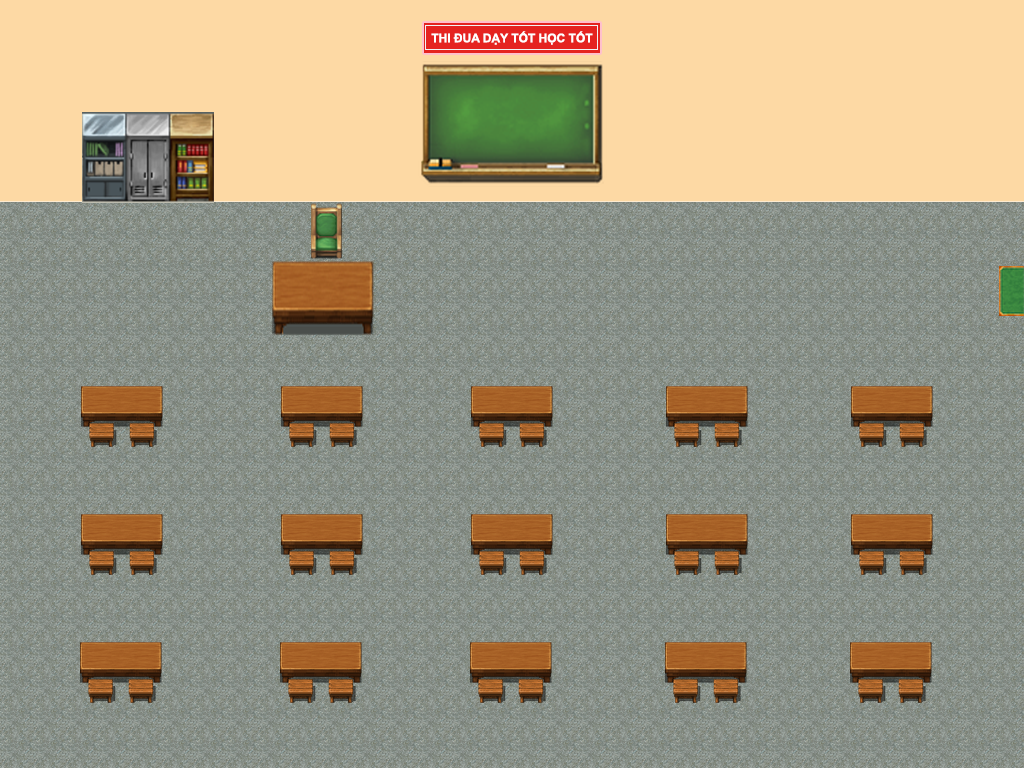
<style>
.page{position:relative;width:1024px;height:768px;background:#fdd9a4}
.page>*{position:absolute;margin:0}
.t1{font:12px "Arial-BoldMT";color:#ffffff}
</style>
<div class="page">
<p class="t1" style="left:431px;top:31px;width:162px;height:14px">THI ĐUA DẠY TỐT HỌC TỐT</p>
</div>
